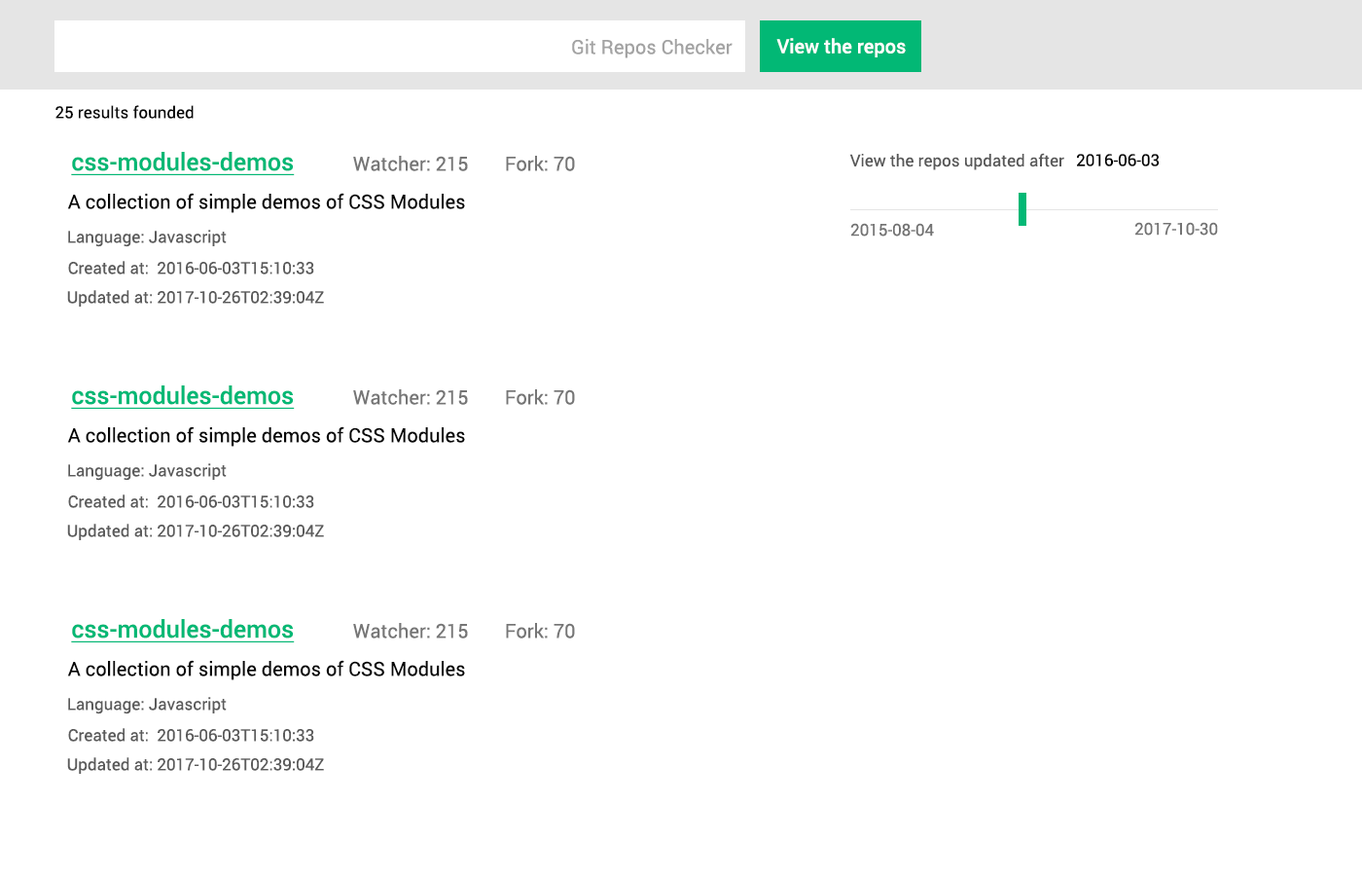
<style>
.page{position:relative;width:1362px;height:876px;background:#ffffff}
.page>*{position:absolute;margin:0}
.t1{font:19.5px "Roboto-Regular";color:#a3a3a3}
.t2{font:19.5px "Roboto-Medium";color:#ffffff}
.t3{font:16.5px "Roboto-Regular";color:#070707}
.t4{font:24.3px "Roboto-Medium";color:#02b875;text-decoration:underline}
.t5{font:19.5px "Roboto-Regular";color:#767676}
.t6{font:16.5px "Roboto-Regular";color:#585858}
.t7{font:16.5px "Roboto-Regular";color:#000000}
.t8{font:19.5px "Roboto-Regular";color:#070707}
.t9{font:16.5px "Roboto-Regular";color:#737373}
.t10{font:16.5px "Roboto-Regular";color:#5b5b5b}
</style>
<div class="page">
<p class="t1" style="left:572px;top:39px;width:161px;height:19px">Git Repos Checker</p>
<p class="t2" style="left:776px;top:38px;width:130px;height:19px">View the repos</p>
<p class="t3" style="left:55px;top:105px;width:139px;height:14px">25 results founded</p>
<p class="t4" style="left:71px;top:152px;width:224px;height:23px">css-modules-demos</p>
<p class="t5" style="left:353px;top:156px;width:115px;height:15px">Watcher: 215</p>
<p class="t5" style="left:506px;top:156px;width:69px;height:15px">Fork: 70</p>
<p class="t6" style="left:849px;top:153px;width:215px;height:17px">View the repos updated after</p>
<p class="t7" style="left:1077px;top:154px;width:83px;height:12px">2016-06-03</p>
<p class="t8" style="left:67px;top:193px;width:398px;height:20px">A collection of simple demos of CSS Modules</p>
<p class="t9" style="left:1134px;top:222px;width:84px;height:13px">2017-10-30</p>
<p class="t10" style="left:68px;top:230px;width:159px;height:17px">Language: Javascript</p>
<p class="t9" style="left:850px;top:223px;width:84px;height:13px">2015-08-04</p>
<p class="t10" style="left:68px;top:261px;width:246px;height:13px">Created at:  2016-06-03T15:10:33</p>
<p class="t10" style="left:67px;top:290px;width:257px;height:16px">Updated at: 2017-10-26T02:39:04Z</p>
<p class="t4" style="left:71px;top:385px;width:224px;height:24px">css-modules-demos</p>
<p class="t5" style="left:353px;top:389px;width:115px;height:16px">Watcher: 215</p>
<p class="t5" style="left:506px;top:389px;width:69px;height:16px">Fork: 70</p>
<p class="t8" style="left:67px;top:426px;width:398px;height:21px">A collection of simple demos of CSS Modules</p>
<p class="t10" style="left:68px;top:463px;width:159px;height:18px">Language: Javascript</p>
<p class="t10" style="left:68px;top:494px;width:246px;height:14px">Created at:  2016-06-03T15:10:33</p>
<p class="t10" style="left:67px;top:523px;width:257px;height:17px">Updated at: 2017-10-26T02:39:04Z</p>
<p class="t4" style="left:71px;top:619px;width:224px;height:23px">css-modules-demos</p>
<p class="t5" style="left:353px;top:623px;width:115px;height:15px">Watcher: 215</p>
<p class="t5" style="left:506px;top:623px;width:69px;height:15px">Fork: 70</p>
<p class="t8" style="left:67px;top:660px;width:398px;height:20px">A collection of simple demos of CSS Modules</p>
<p class="t10" style="left:68px;top:697px;width:159px;height:17px">Language: Javascript</p>
<p class="t10" style="left:68px;top:728px;width:246px;height:13px">Created at:  2016-06-03T15:10:33</p>
<p class="t10" style="left:67px;top:757px;width:257px;height:16px">Updated at: 2017-10-26T02:39:04Z</p>
</div>
